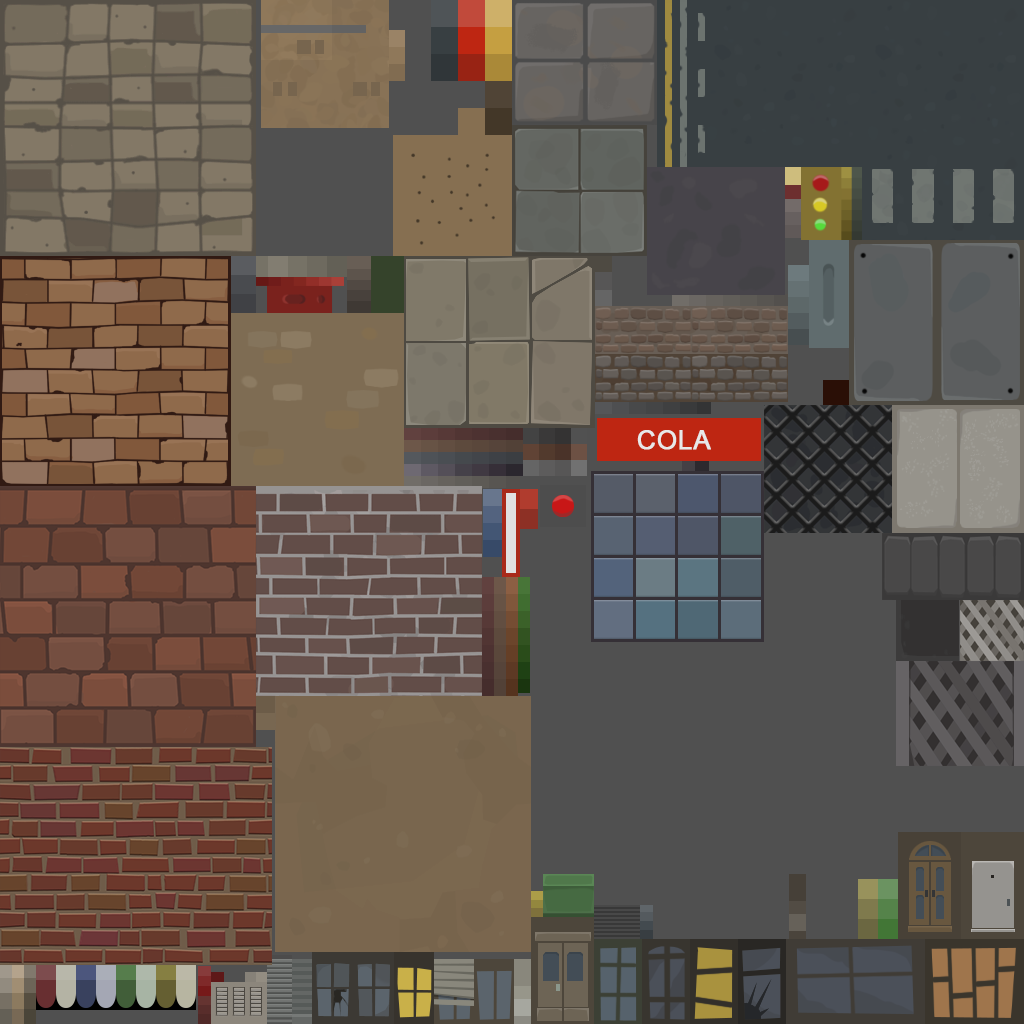
<style>
.page{position:relative;width:1024px;height:1024px}
.page>*{position:absolute;margin:0}
.t1{font:26.3px "ArialMT";color:#e8e8e8;font-weight:bold}
</style>
<div class="page">
<p class="t1" style="left:637px;top:430px;width:74px;height:20px">COLA</p>
</div>
